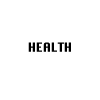
<style>
.page{position:relative;width:100px;height:100px;background:#ffffff}
.page>*{position:absolute;margin:0}
.t1{font:12px "Krungthep";color:#000000}
</style>
<div class="page">
<p class="t1" style="left:28px;top:42px;width:43px;height:10px">HEALTH</p>
</div>
